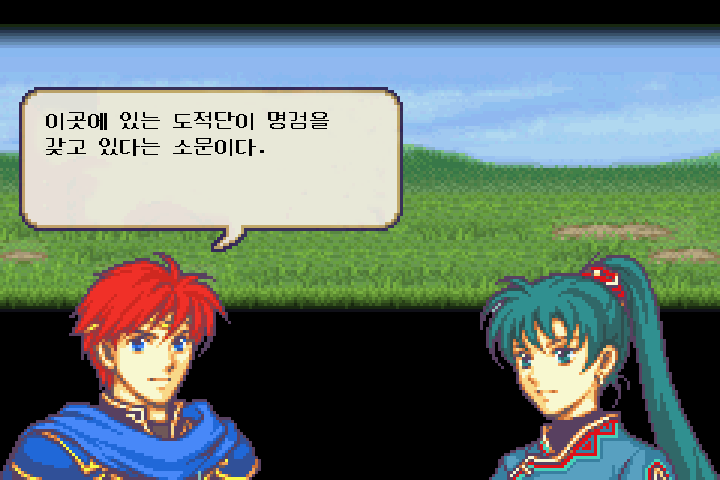
<style>
.page{position:relative;width:720px;height:480px;background:#000000}
.page>*{position:absolute;margin:0}
.t1{font:21.3px "DungGeunMo";color:#000000}
</style>
<div class="page">
<p class="t1" style="left:46px;top:112px;width:283px;height:44px">이곳에 있는 도적단이 명검을 갖고 있다는 소문이다.</p>
</div>
